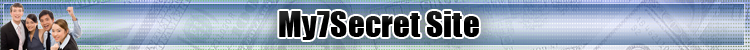
<style>
.page{position:relative;width:750px;height:50px}
.page>*{position:absolute;margin:0}
.t1{font:33.3px "Impact";color:#000000}
</style>
<div class="page">
<p class="t1" style="left:279px;top:11px;width:200px;height:29px">My7Secret Site</p>
</div>
